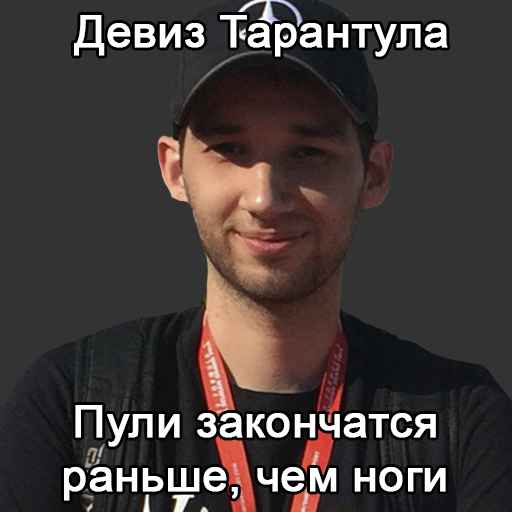
<style>
.page{position:relative;width:512px;height:512px;background:#333333}
.page>*{position:absolute;margin:0}
.t1{font:45px "ArialMT";color:#ffffff;font-weight:bold}
</style>
<div class="page">
<p class="t1" style="left:74px;top:15px;width:374px;height:42px">Девиз Тарантула</p>
<p class="t1" style="left:64px;top:405px;width:382px;height:96px;text-align:center">Пули закончатся<br>раньше, чем ноги</p>
</div>
